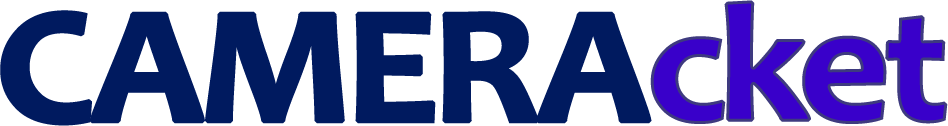
<style>
.page{position:relative;width:948px;height:126px;background:#ffffff}
.page>*{position:absolute;margin:0}
.t1{font:167.6px "Candara-Bold";letter-spacing:-0.05em;color:#3900ca;font-weight:bold;scale:1.06 1}
.t2{font:167.6px "Candara-Bold";letter-spacing:-0.05em;color:#001a5f;font-weight:bold;scale:1.06 1}
</style>
<div class="page">
<p class="t1" style="left:650px;top:0px;width:298px;height:124px">cket</p>
<p class="t2" style="left:0px;top:10px;width:652px;height:116px">CAMERA</p>
</div>
